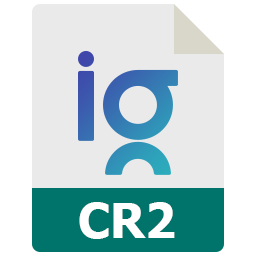
<style>
.page{position:relative;width:256px;height:256px;background:#eaeaea}
.page>*{position:absolute;margin:0}
.t1{font:48px "Tahoma-Bold";color:#ffffff}
</style>
<div class="page">
<p class="t1" style="left:79px;top:202px;width:96px;height:37px">CR2</p>
</div>
